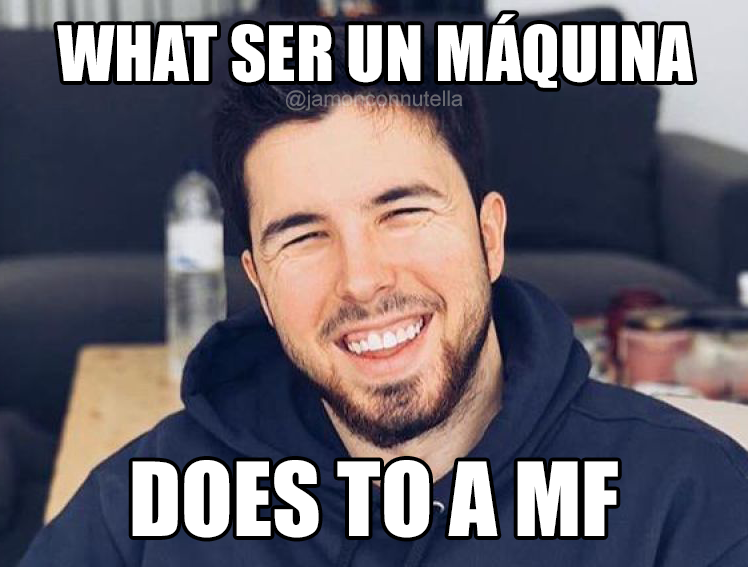
<style>
.page{position:relative;width:748px;height:567px}
.page>*{position:absolute;margin:0}
.t1{font:70.4px "Impact";color:#ffffff}
.t2{font:21.5px "ArialMT";color:#6a6a72}
.t3{font:94.4px "Impact";color:#ffffff}
</style>
<div class="page">
<p class="t1" style="left:57px;top:14px;width:637px;height:74px">WHAT SER UN MÁQUINA</p>
<p class="t2" style="left:286px;top:90px;width:177px;height:21px">@jamonconnutella</p>
<p class="t3" style="left:132px;top:460px;width:486px;height:78px">DOES TO A MF</p>
</div>
